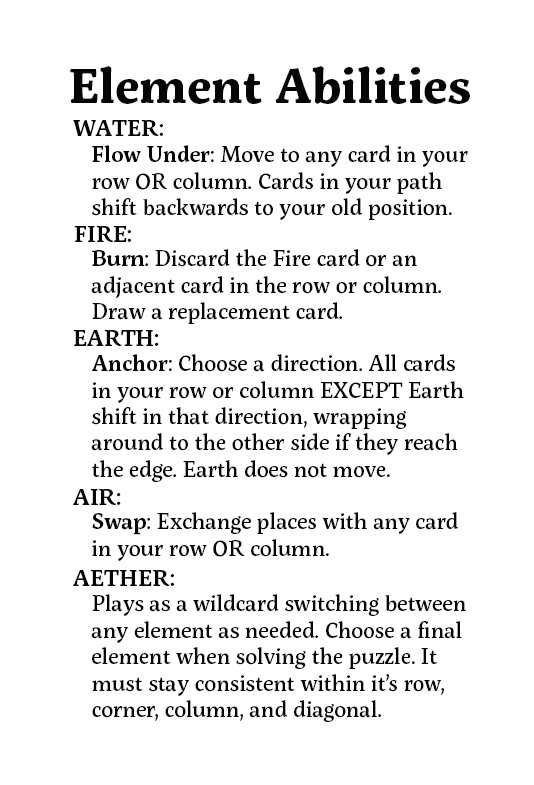
<style>
.page{position:relative;width:534px;height:785px;background:#ffffff}
.page>*{position:absolute;margin:0}
.t1{font:48px "ServusSlab-Bold";color:#060606}
.t2{font:23px "ServusSlab-SemiBold";color:#060606}
.t3{font:22px "ServusSlab-Medium";color:#060606}
.t4{font:22px "ServusSlab-SemiBold";color:#060606}
</style>
<div class="page">
<p class="t1" style="left:70px;top:66px;width:400px;height:38px">Element Abilities</p>
<p class="t2" style="left:73px;top:120px;width:90px;height:16px">WATER:</p>
<p class="t3" style="left:92px;top:145px;width:376px;height:75px"><span class="t4">Flow Under</span>: Move to any card in your row OR column. Cards in your path shift backwards to your old position.</p>
<p class="t2" style="left:74px;top:226px;width:57px;height:16px">FIRE:</p>
<p class="t3" style="left:91px;top:249px;width:350px;height:75px"><span class="t4">Burn</span>: Discard the Fire card or an adjacent card in the row or column. Draw a replacement card.</p>
<p class="t2" style="left:73px;top:330px;width:86px;height:16px">EARTH:</p>
<p class="t3" style="left:91px;top:354px;width:373px;height:128px"><span class="t4">Anchor</span>: Choose a direction. All cards in your row or column EXCEPT Earth shift in that direction, wrapping around to the other side if they reach the edge. Earth does not move.</p>
<p class="t2" style="left:73px;top:489px;width:48px;height:16px">AIR:</p>
<p class="t3" style="left:92px;top:512px;width:366px;height:49px"><span class="t4">Swap</span>: Exchange places with any card in your row OR column.</p>
<p class="t2" style="left:73px;top:570px;width:101px;height:16px">AETHER:</p>
<p class="t3" style="left:91px;top:594px;width:375px;height:128px">Plays as a wildcard switching between any element as needed. Choose a final element when solving the puzzle. It must stay consistent within it’s row, corner, column, and diagonal.</p>
</div>
